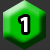
<style>
.page{position:relative;width:50px;height:50px;background:#333333}
.page>*{position:absolute;margin:0}
.t1{font:22px "MyriadPro-Bold";color:#ffffff}
</style>
<div class="page">
<p class="t1" style="left:20px;top:17px;width:8px;height:15px">1</p>
</div>
